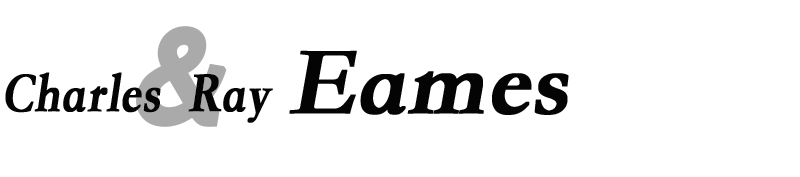
<style>
.page{position:relative;width:800px;height:177px;background:#ffffff}
.page>*{position:absolute;margin:0}
.t1{font:140px "FranklinGothic-Medium";color:#aaaaaa;font-weight:bold;font-style:italic;scale:0.86 1}
.t2{font:97.8px "STSongti-TC-Bold";color:#040404;font-weight:bold;font-style:italic}
.t3{font:57.6px "STSongti-TC-Bold";color:#040404;font-weight:bold;font-style:italic;scale:0.83 1}
</style>
<div class="page">
<p class="t1" style="left:136px;top:26px;width:91px;height:101px">&amp;</p>
<p class="t2" style="left:289px;top:50px;width:280px;height:65px">Eames</p>
<p class="t3" style="left:5px;top:72px;width:268px;height:51px">Charles  Ray</p>
</div>
